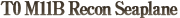
<style>
.page{position:relative;width:180px;height:18px;background:#ffffff}
.page>*{position:absolute;margin:0}
.t1{font:18px "RyuminPro-ExBold";letter-spacing:-0.08em;color:#4a3f32;font-weight:bold;scale:0.9 1}
</style>
<div class="page">
<p class="t1" style="left:0px;top:1px;width:178px;height:18px">T0 M11B Recon Seaplane</p>
</div>
